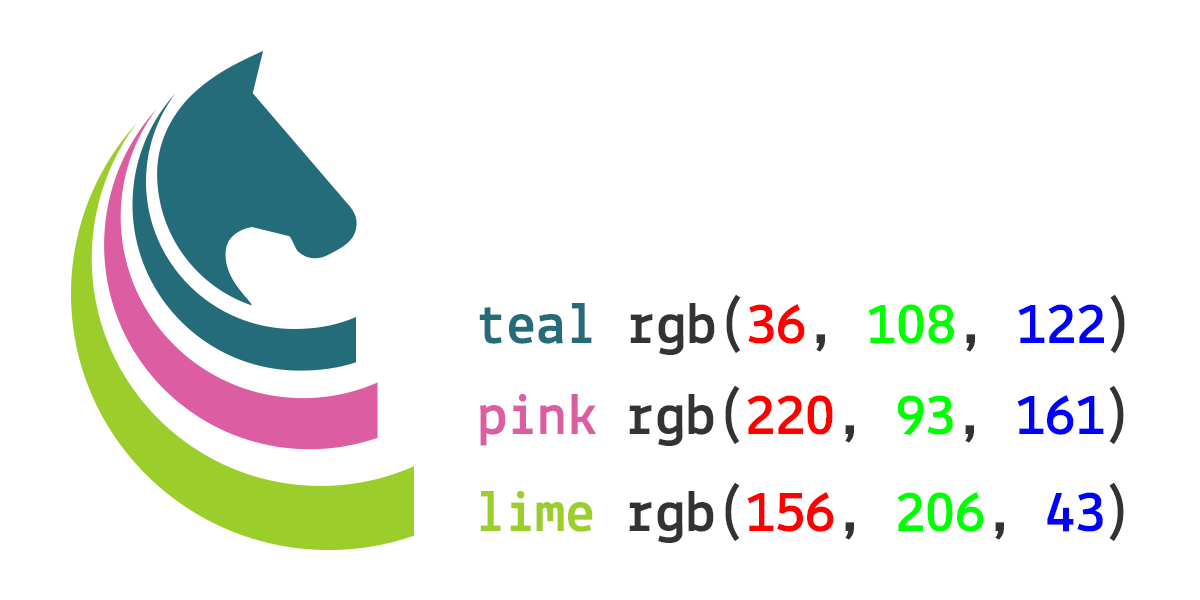
<style>
.page{position:relative;width:1200px;height:600px;background:#ffffff}
.page>*{position:absolute;margin:0}
.t1{font:60px "Lekton-Bold";color:#246c7a}
.t2{font:60px "Lekton-Bold";color:#333333}
.t3{font:60px "Lekton-Bold";color:#ff0000}
.t4{font:60px "Lekton-Bold";color:#00ff00}
.t5{font:60px "Lekton-Bold";color:#0000ff}
.t6{font:60px "Lekton-Bold";color:#dc5da1}
.t7{font:60px "Lekton-Bold";color:#9cce2b}
</style>
<div class="page">
<p class="t1" style="left:479px;top:294px;width:646px;height:61px">teal <span class="t2">rgb(</span><span class="t3">36</span><span class="t2">, </span><span class="t4">108</span><span class="t2">, </span><span class="t5">122</span><span class="t2">)</span></p>
<p class="t6" style="left:480px;top:385px;width:644px;height:61px">pink <span class="t2">rgb(</span><span class="t3">220</span><span class="t2">, </span><span class="t4">93</span><span class="t2">, </span><span class="t5">161</span><span class="t2">)</span></p>
<p class="t7" style="left:480px;top:482px;width:644px;height:61px">lime <span class="t2">rgb(</span><span class="t3">156</span><span class="t2">, </span><span class="t4">206</span><span class="t2">, </span><span class="t5">43</span><span class="t2">)</span></p>
</div>
